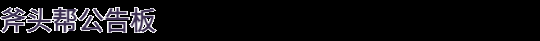
<style>
.page{position:relative;width:540px;height:41px;background:#000000}
.page>*{position:absolute;margin:0}
.t1{font:26px "WebPSD-18463539-0-Regular";color:#3f3254;font-weight:bold}
</style>
<div class="page">
<p class="t1" style="left:0px;top:0px;width:540px;height:41px">斧头帮公告板</p>
</div>
